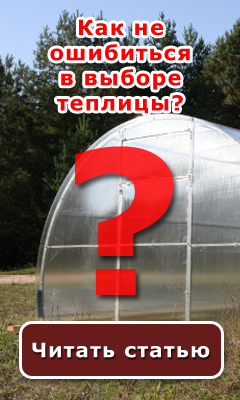
<style>
.page{position:relative;width:240px;height:400px}
.page>*{position:absolute;margin:0}
.t1{font:21px "Verdana-Bold";letter-spacing:0.06em;color:#fc0000}
.t2{font:200px "Verdana-Bold";letter-spacing:0.06em;color:#f11d1e}
.t3{font:20px "Verdana-Bold";letter-spacing:0.06em;color:#ffffff}
</style>
<div class="page">
<p class="t1" style="left:50px;top:19px;width:140px;height:95px;text-align:center">Как не ошибиться <br>в выборе теплицы?</p>
<p class="t2" style="left:75px;top:146px;width:99px;height:149px">?</p>
<p class="t3" style="left:32px;top:342px;width:178px;height:16px">Читать статью</p>
</div>
